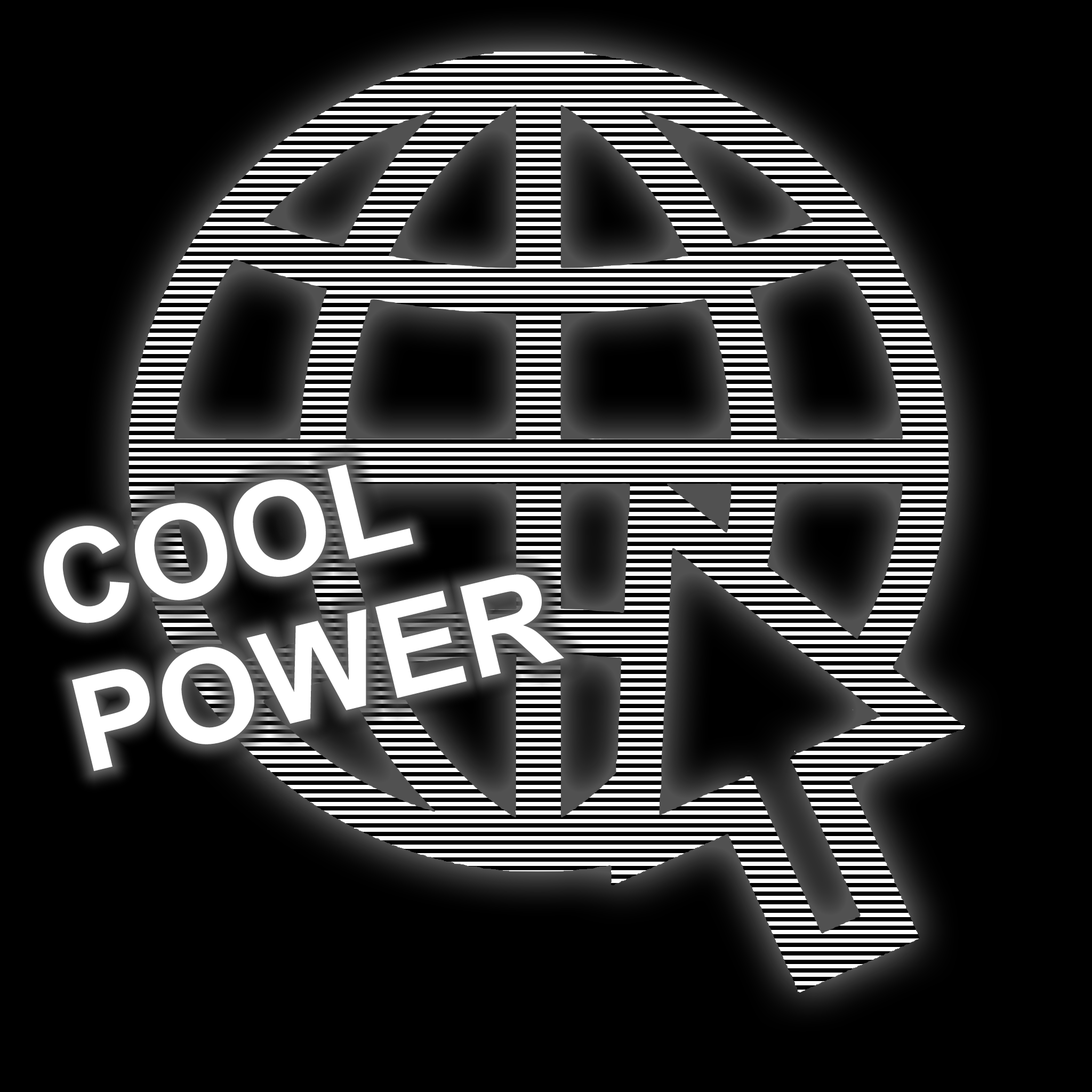
<style>
.page{position:relative;width:1092px;height:1092px;background:#000000}
.page>*{position:absolute;margin:0}
.t1{font:130.5px/146px "Arial-BoldMT";color:#ffffff}
</style>
<div class="page">
<p class="t1" style="left:44px;top:464px;width:520px;height:307px;rotate:-14deg">COOL <br>POWER</p>
</div>
